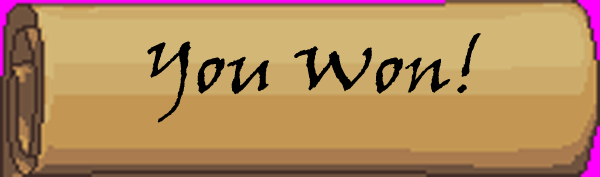
<style>
.page{position:relative;width:600px;height:177px;background:#c39753}
.page>*{position:absolute;margin:0}
.t1{font:72px "VinerHandITC";color:#000000}
</style>
<div class="page">
<p class="t1" style="left:147px;top:33px;width:334px;height:90px">You Won!</p>
</div>
